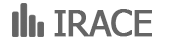
<style>
.page{position:relative;width:181px;height:41px;background:#ffffff}
.page>*{position:absolute;margin:0}
.t1{font:36px "Tahoma";letter-spacing:-0.025em;color:#656565;text-transform:uppercase;font-weight:bold}
</style>
<div class="page">
<p class="t1" style="left:54px;top:9px;width:98px;height:28px">iRace</p>
</div>
